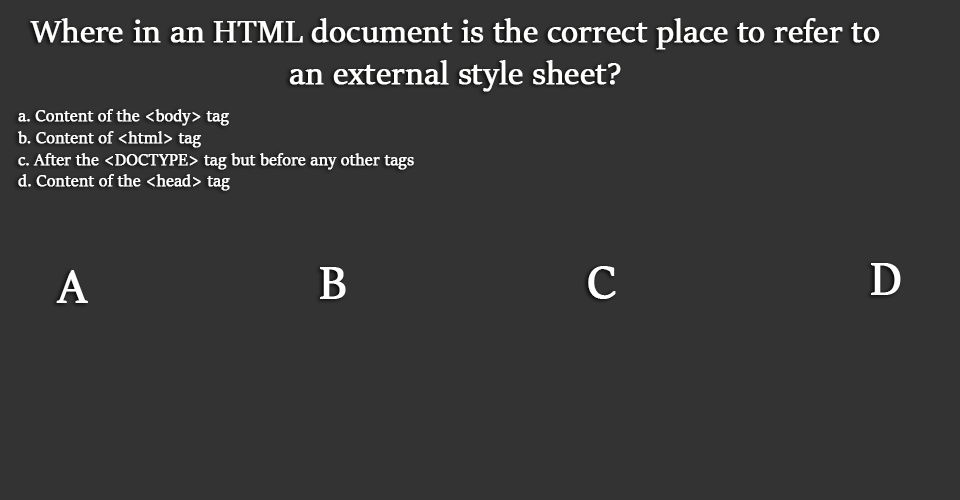
<style>
.page{position:relative;width:960px;height:500px;background:#333333}
.page>*{position:absolute;margin:0}
.t1{font:35px "SitkaBanner";color:#fffffe;font-weight:bold}
.t2{font:18px "SitkaBanner";color:#ffffff;font-weight:bold}
.t3{font:50px "SitkaBanner";color:#ffffff;font-weight:bold}
</style>
<div class="page">
<p class="t1" style="left:30px;top:18px;width:850px;height:74px;text-align:center">Where in an HTML document is the correct place to refer to an external style sheet?</p>
<p class="t2" style="left:18px;top:109px;width:396px;height:82px">a. Content of the &lt;body&gt; tag<br> b. Content of &lt;html&gt; tag<br> c. After the &lt;DOCTYPE&gt; tag but before any other tags<br> d. Content of the &lt;head&gt; tag</p>
<p class="t3" style="left:56px;top:270px;width:32px;height:33px">A</p>
<p class="t3" style="left:320px;top:267px;width:26px;height:32px">B</p>
<p class="t3" style="left:588px;top:266px;width:28px;height:33px">C</p>
<p class="t3" style="left:871px;top:263px;width:30px;height:32px">D</p>
</div>
